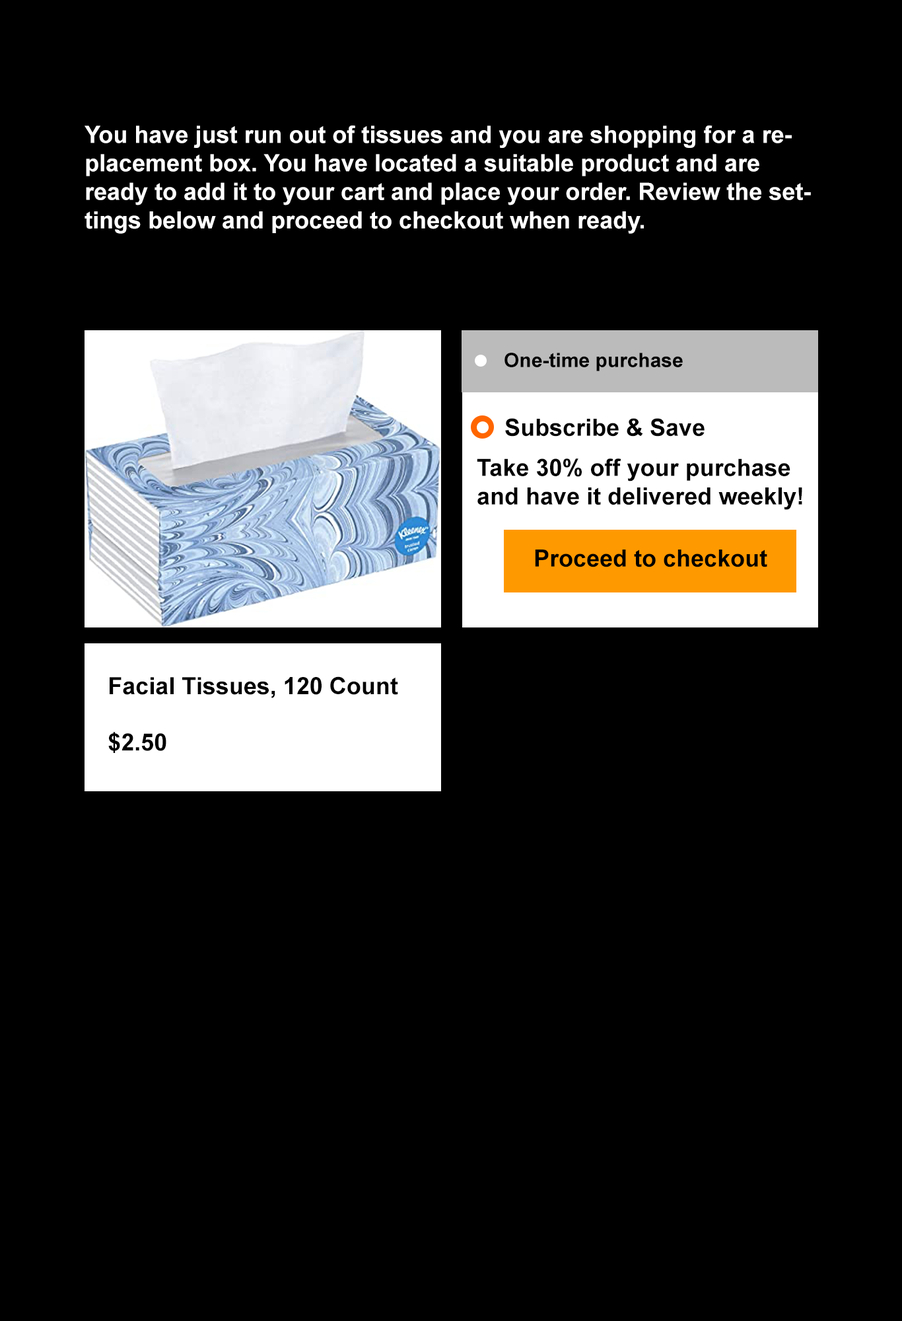
<style>
.page{position:relative;width:902px;height:1321px;background:#000000}
.page>*{position:absolute;margin:0}
.t1{font:23.8px "Arial-BoldMT";color:#ffffff}
.t2{font:19.8px "Arial-BoldMT";color:#000000}
.t3{font:23.8px "Arial-BoldMT";color:#000000}
</style>
<div class="page">
<p class="t1" style="left:85px;top:126px;width:726px;height:108px">You have just run out of tissues and you are shopping for a replacement box. You have located a suitable product and are ready to add it to your cart and place your order. Review the settings below and proceed to checkout when ready.</p>
<p class="t2" style="left:505px;top:353px;width:178px;height:18px">One-time purchase</p>
<p class="t3" style="left:505px;top:418px;width:200px;height:19px">Subscribe &amp; Save</p>
<p class="t3" style="left:477px;top:458px;width:326px;height:52px">Take 30% off your purchase and have it delivered weekly!</p>
<p class="t3" style="left:535px;top:550px;width:233px;height:18px">Proceed to checkout</p>
<p class="t3" style="left:110px;top:677px;width:288px;height:21px">Facial Tissues, 120 Count</p>
<p class="t3" style="left:108px;top:732px;width:58px;height:21px">$2.50</p>
</div>
